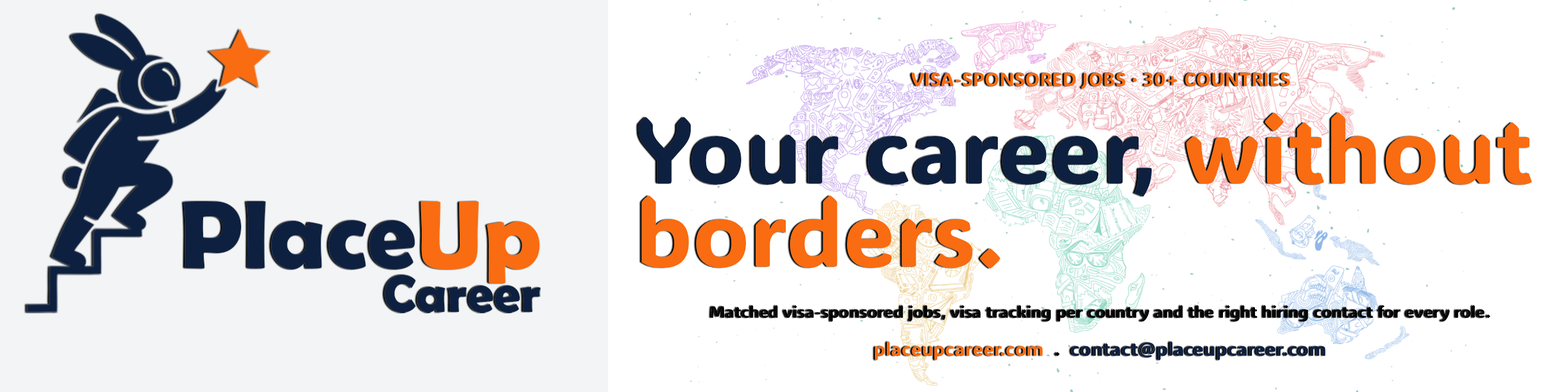
<style>
.page{position:relative;width:1568px;height:392px;background:#ffffff}
.page>*{position:absolute;margin:0}
.t1{font:19px "ADLaMDisplay-Regular";color:#f96c11}
.t2{font:92.7px/83.2px "ADLaMDisplay-Regular";color:#f96c11}
.t3{font:92.7px/83.2px "ADLaMDisplay-Regular";color:#0e203f}
.t4{font:16.6px "ADLaMDisplay-Regular";color:#000000}
.t5{font:19px "ADLaMDisplay-Regular";color:#0e203f}
.t6{font:19px "ADLaMDisplay-Regular";color:#000000}
</style>
<div class="page">
<p class="t1" style="left:911px;top:72px;width:379px;height:18px">VISA-SPONSORED JOBS · 30+ COUNTRIES</p>
<p class="t2" style="left:638px;top:112px;width:894px;height:157px"><span class="t3">Your career,</span> without<br>borders.</p>
<p class="t4" style="left:711px;top:305px;width:779px;height:17px">Matched visa-sponsored jobs, visa tracking per country and the right hiring contact for every role.</p>
<p class="t5" style="left:875px;top:341px;width:451px;height:20px"><span class="t1">placeupcareer.com  </span><span class="t6">.  </span>contact@placeupcareer.com</p>
</div>
